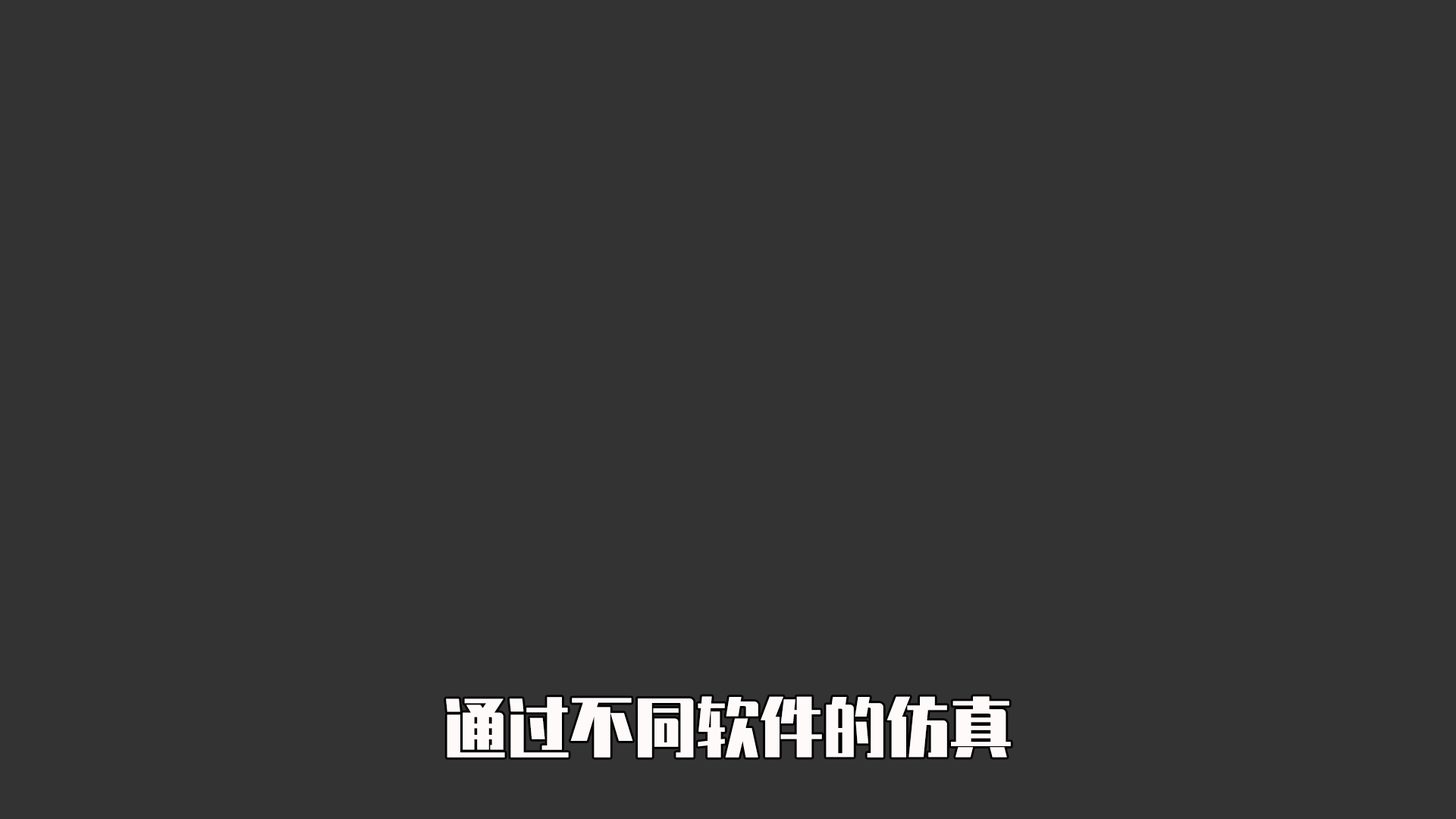
<style>
.page{position:relative;width:1456px;height:819px;background:#333333}
.page>*{position:absolute;margin:0}
.t1{font:63.2px "ZhenyanGB-Regular";color:#fefafa}
</style>
<div class="page">
<p class="t1" style="left:446px;top:696px;width:565px;height:62px">通过不同软件的仿真</p>
</div>
